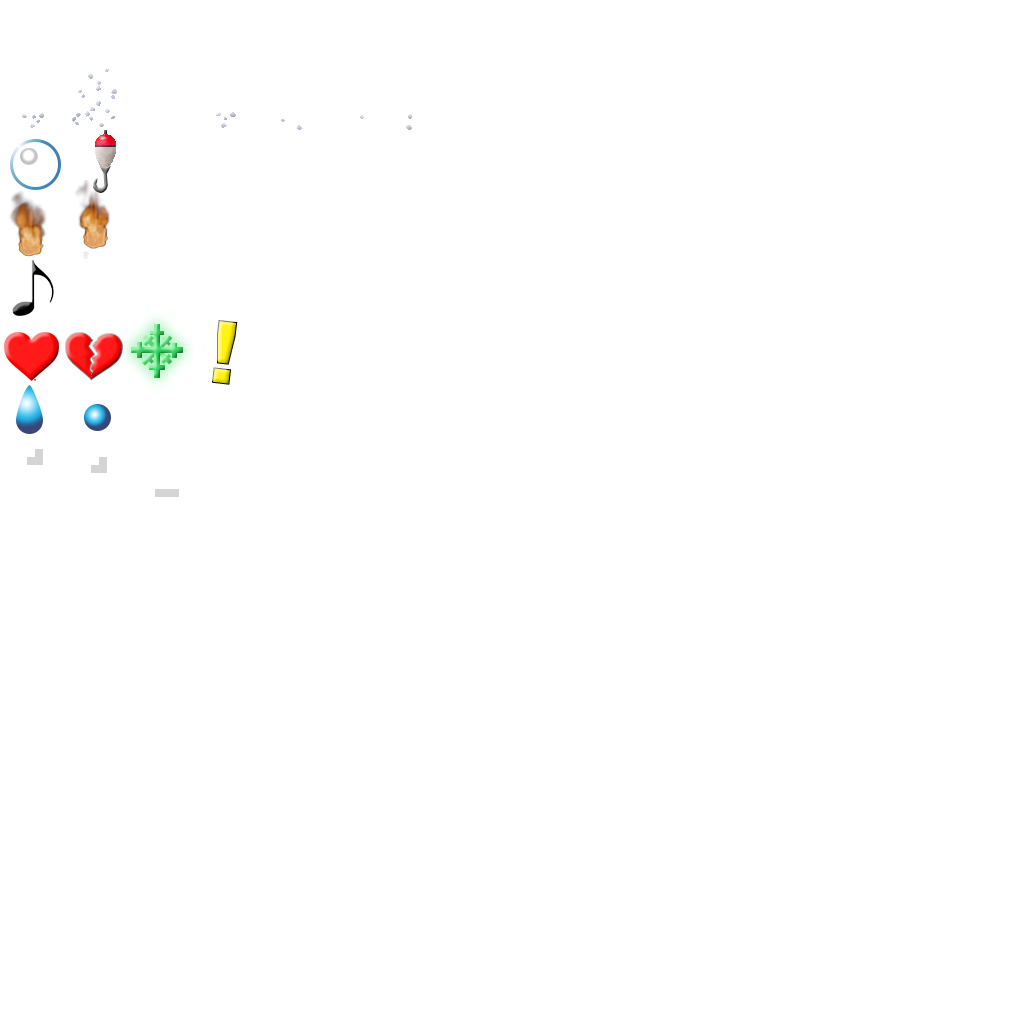
<style>
.page{position:relative;width:1024px;height:1024px;background:#ffffff}
.page>*{position:absolute;margin:0}
.t1{font:88px "Arial-Black"}
</style>
<div class="page">
<p class="t1" style="left:212px;top:320px;width:26px;height:65px;rotate:7deg">!</p>
</div>
